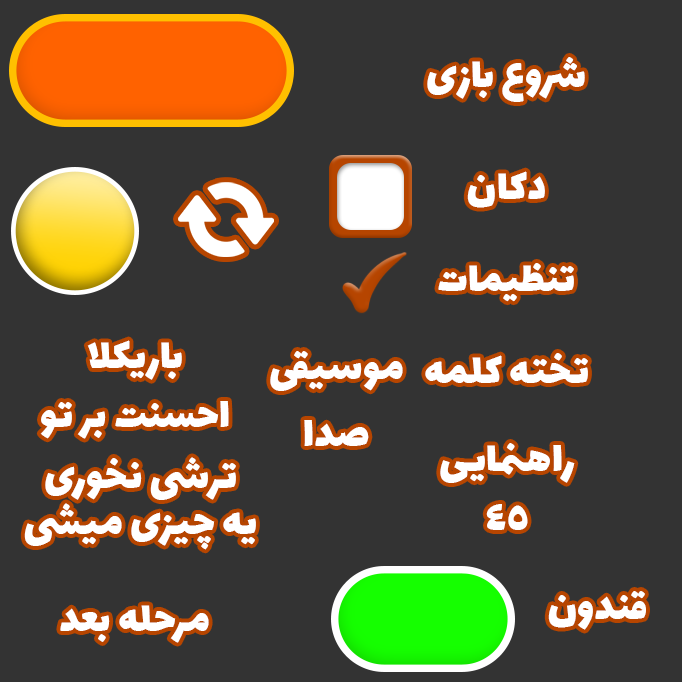
<style>
.page{position:relative;width:682px;height:682px;background:#333333}
.page>*{position:absolute;margin:0}
.t1{font:45.8px "Lalezar-Regular";color:#ffffff}
.t2{font:45.8px/58.3px "Lalezar-Regular";color:#ffffff}
.t3{font:45.8px/45.8px "Lalezar-Regular";color:#ffffff}
</style>
<div class="page">
<p class="t1" style="left:427px;top:57px;width:158px;height:45px">شروع بازی</p>
<p class="t1" style="left:467px;top:171px;width:78px;height:37px">دکان</p>
<p class="t1" style="left:438px;top:263px;width:136px;height:39px">تنظیمات</p>
<p class="t1" style="left:87px;top:340px;width:95px;height:40px">باریکلا</p>
<p class="t1" style="left:270px;top:351px;width:133px;height:40px">موسیقی</p>
<p class="t1" style="left:425px;top:353px;width:163px;height:30px">تخته کلمه</p>
<p class="t1" style="left:40px;top:401px;width:189px;height:38px">احسنت بر تو</p>
<p class="t1" style="left:304px;top:420px;width:65px;height:26px">صدا</p>
<p class="t2" style="left:440px;top:443px;width:135px;height:87px;text-align:center">راهنمایی<br>45</p>
<p class="t3" style="left:24px;top:457px;width:232px;height:93px;text-align:center">ترشی نخوری <br>یه چیزی میشی</p>
<p class="t1" style="left:548px;top:591px;width:98px;height:39px">قندون</p>
<p class="t1" style="left:60px;top:605px;width:149px;height:38px">مرحله بعد</p>
</div>
